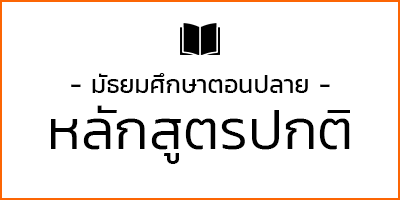
<style>
.page{position:relative;width:400px;height:200px;background:#ffffff}
.page>*{position:absolute;margin:0}
.t1{font:25px "Kanit-Regular";color:#000000}
.t2{font:57px/107.4px "Kanit-Light";color:#000000}
.t3{font:57px/107.4px "Kanit-SemiBold";color:#000000}
</style>
<div class="page">
<p class="t1" style="left:71px;top:73px;width:259px;height:20px">- มัธยมศึกษาตอนปลาย -</p>
<p class="t2" style="left:51px;top:105px;width:299px;height:59px;text-align:center">หลักสูตรปกติ<br><span class="t3">EMSP</span></p>
</div>
